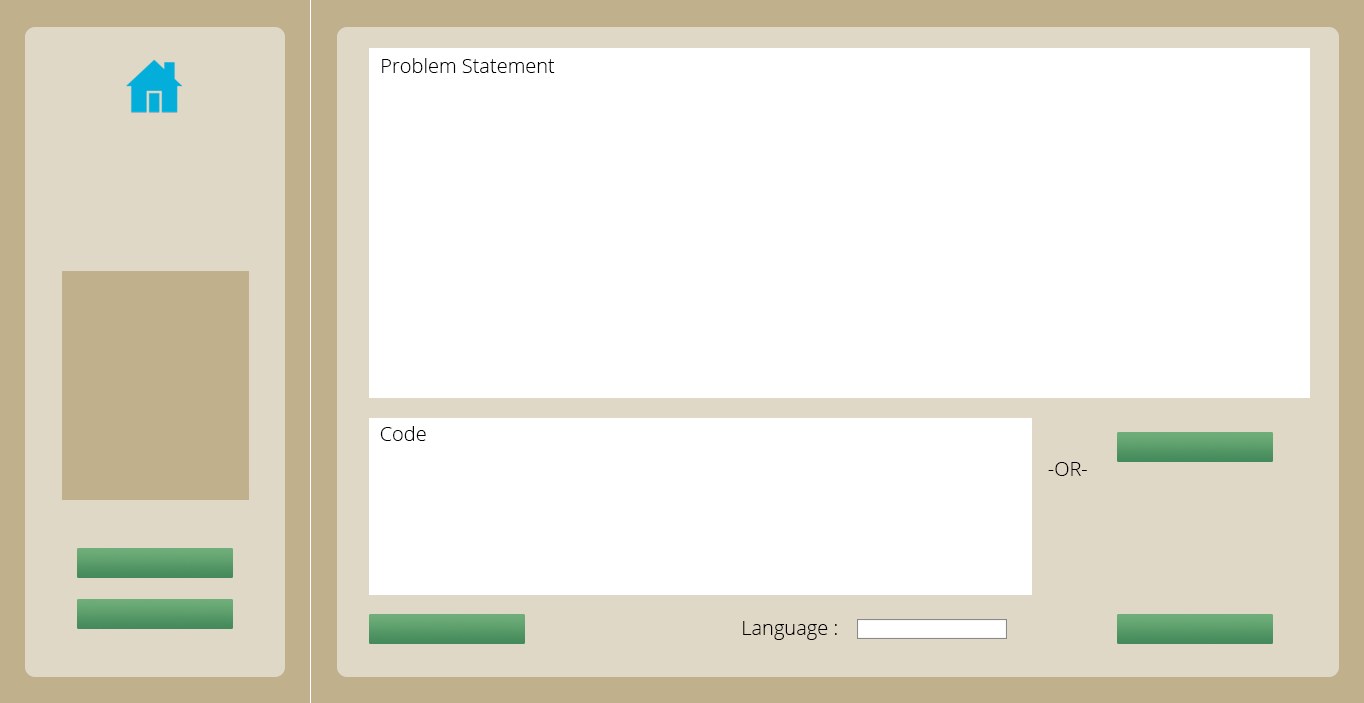
<style>
.page{position:relative;width:1364px;height:703px;background:#ffffff}
.page>*{position:absolute;margin:0}
.t1{font:20px "OpenSans-Light";color:#000000}
</style>
<div class="page">
<p class="t1" style="left:382px;top:58px;width:173px;height:15px">Problem Statement</p>
<p class="t1" style="left:380px;top:426px;width:46px;height:15px">Code</p>
<p class="t1" style="left:1048px;top:462px;width:39px;height:14px">-OR-</p>
<p class="t1" style="left:743px;top:621px;width:94px;height:19px">Language :</p>
</div>
